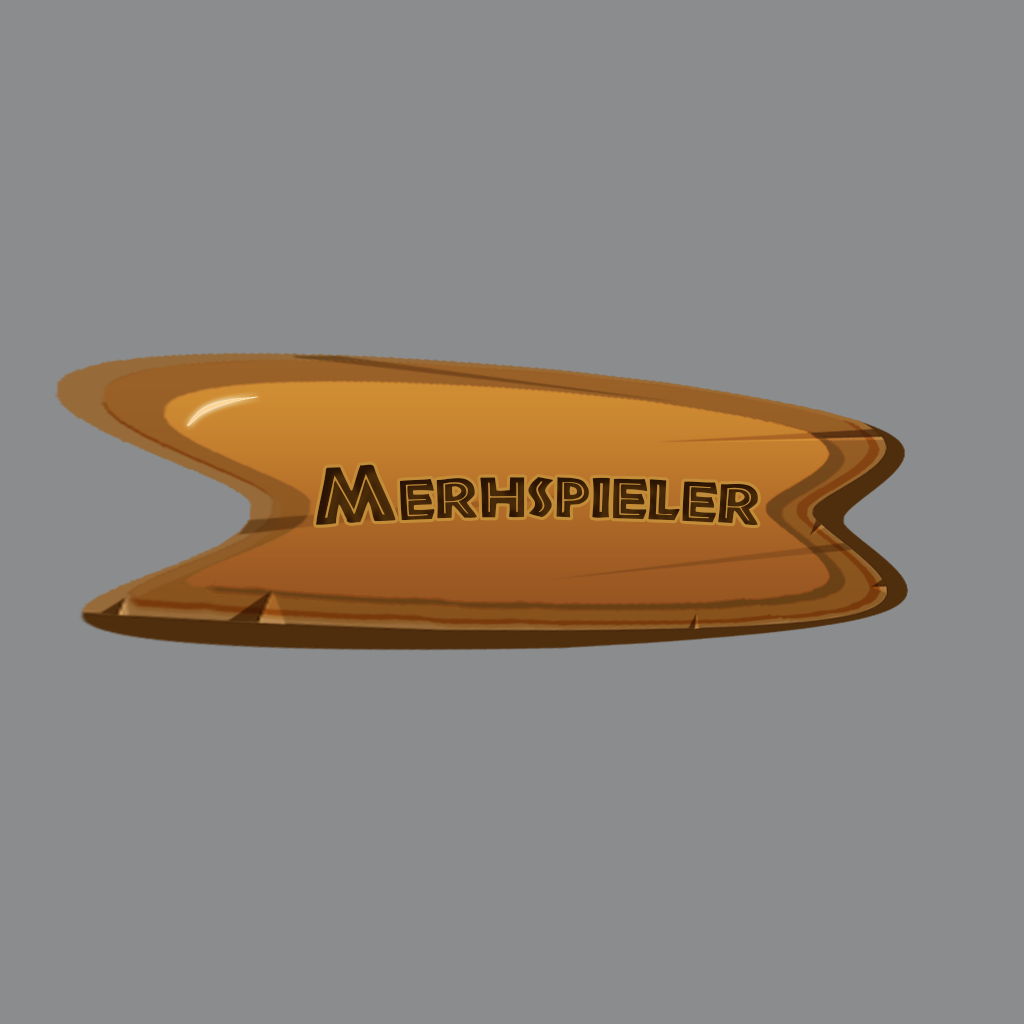
<style>
.page{position:relative;width:1024px;height:1024px;background:#8b8c8d}
.page>*{position:absolute;margin:0}
.t1{font:75px "African";color:#53320b;font-variant:small-caps}
</style>
<div class="page">
<p class="t1" style="left:316px;top:464px;width:442px;height:62px">Merhspieler</p>
</div>
